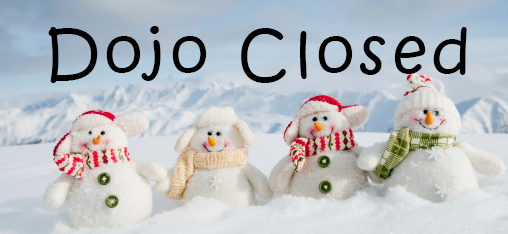
<style>
.page{position:relative;width:508px;height:234px}
.page>*{position:absolute;margin:0}
.t1{font:60px "KristenITC-Regular";letter-spacing:0.1em;color:#000000}
</style>
<div class="page">
<p class="t1" style="left:48px;top:26px;width:419px;height:57px">Dojo Closed</p>
</div>
